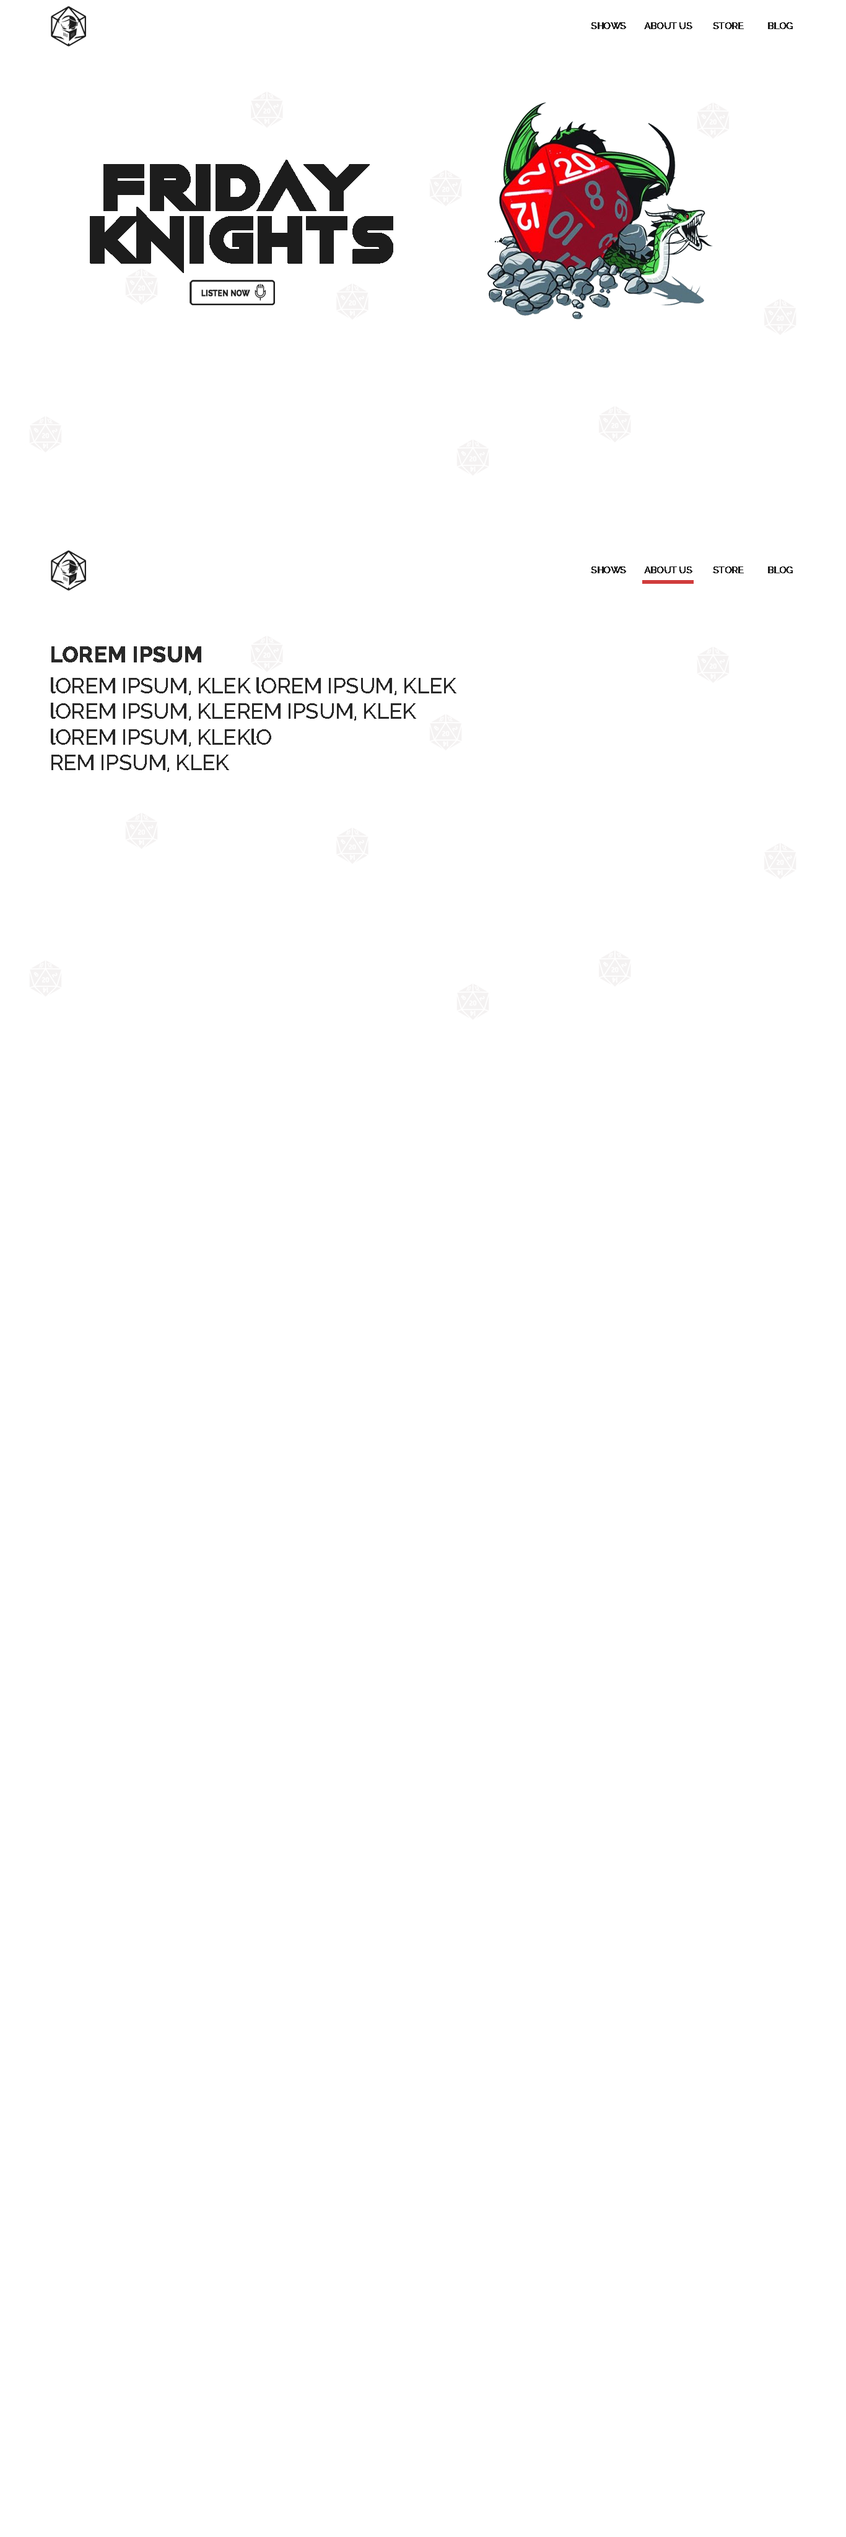
<style>
.page{position:relative;width:846px;height:2537px;background:#ffffff}
.page>*{position:absolute;margin:0}
.t1{font:9px "Raleway-Medium";color:#292929;text-transform:uppercase;font-weight:bold}
.t2{font:68.4px/52.2px "NightMachine";color:#1d1d1d;text-transform:uppercase;font-weight:bold}
.t3{font:21.4px "Raleway-Bold";color:#292929;text-transform:uppercase;font-weight:bold}
.t4{font:21.4px "Raleway-Medium";color:#292929}
</style>
<div class="page">
<p class="t1" style="left:591px;top:22px;width:35px;height:7px">SHOWS</p>
<p class="t1" style="left:644px;top:22px;width:48px;height:7px">ABOUT US</p>
<p class="t1" style="left:713px;top:22px;width:31px;height:7px">STORE</p>
<p class="t1" style="left:768px;top:22px;width:24px;height:7px">BLOG</p>
<p class="t2" style="left:90px;top:160px;width:303px;height:113px;text-align:center">friday<br> knights</p>
<p class="t3" style="left:51px;top:646px;width:150px;height:16px">Lorem ipsum</p>
<p class="t4" style="left:51px;top:677px;width:405px;height:95px">lOREM IPSUM, KLEK lOREM IPSUM, KLEK<br>lOREM IPSUM, KLEREM IPSUM, KLEK<br>lOREM IPSUM, KLEKlO<br>REM IPSUM, KLEK</p>
</div>
